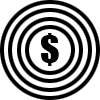
<style>
.page{position:relative;width:100px;height:100px;background:#ffffff}
.page>*{position:absolute;margin:0}
.t1{font:36px "Impact";color:#010101}
</style>
<div class="page">
<p class="t1" style="left:41px;top:33px;width:18px;height:33px">$</p>
</div>
